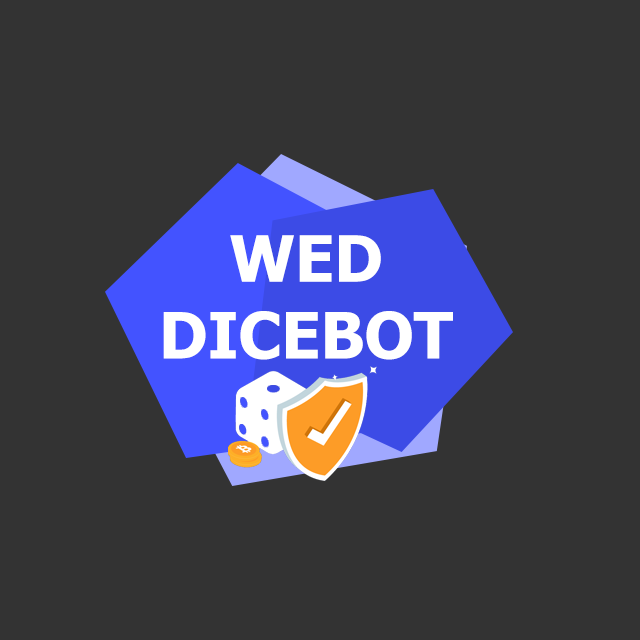
<style>
.page{position:relative;width:640px;height:640px;background:#333333}
.page>*{position:absolute;margin:0}
.t1{font:64px "Tahoma-Bold";color:#ffffff}
</style>
<div class="page">
<p class="t1" style="left:163px;top:235px;width:290px;height:125px;text-align:center">WED<br>DICEBOT</p>
</div>
